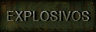
<style>
.page{position:relative;width:96px;height:32px}
.page>*{position:absolute;margin:0}
.t1{font:14px "ArialNarrow";letter-spacing:0.04em;text-transform:uppercase;scale:1.06 1}
</style>
<div class="page">
<p class="t1" style="left:6px;top:11px;width:83px;height:10px">explosivos</p>
</div>
